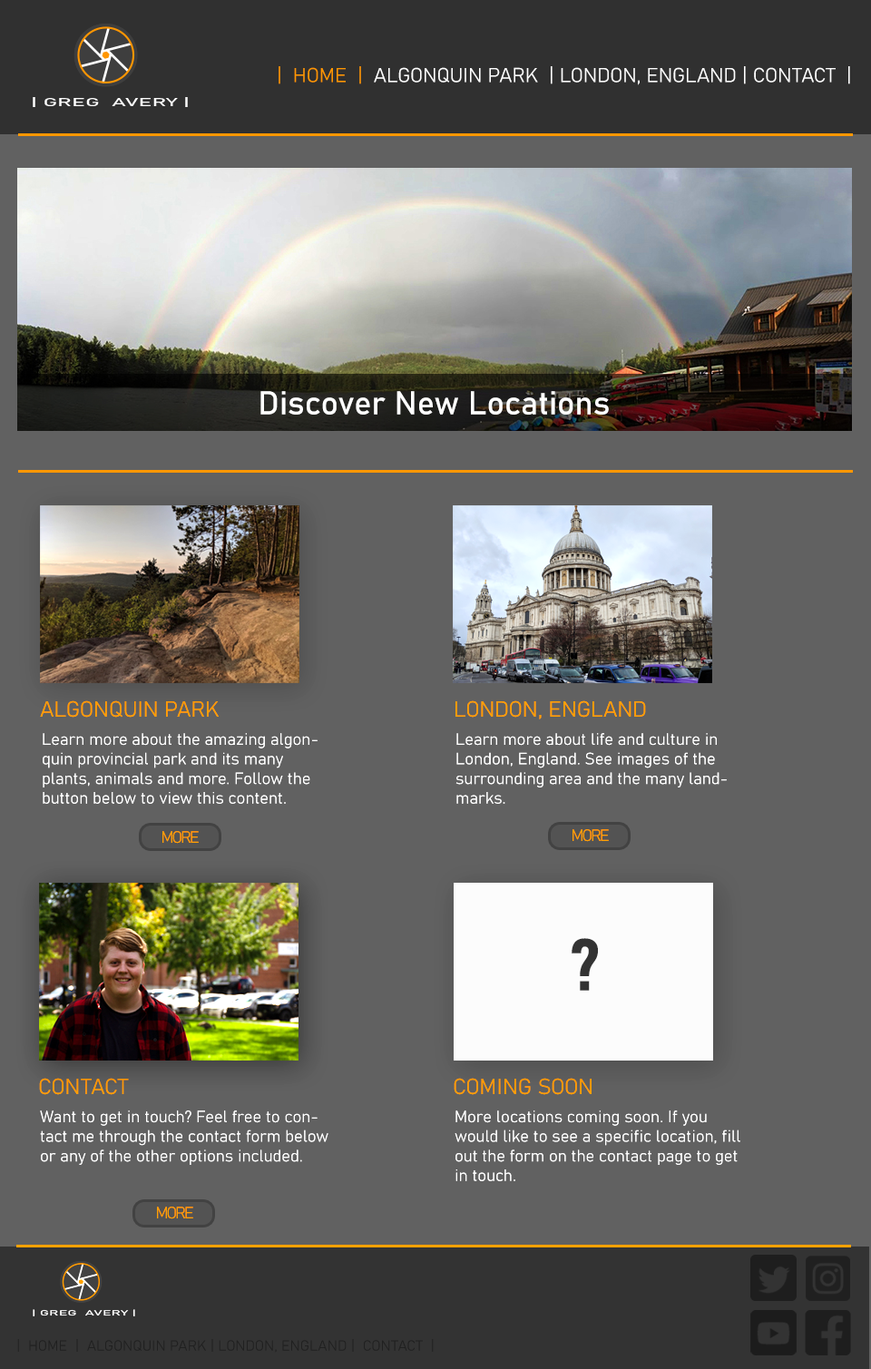
<style>
.page{position:relative;width:871px;height:1369px;background:#616161}
.page>*{position:absolute;margin:0}
.t1{font:20px "Bahnschrift";color:#ffffff;font-style:italic}
.t2{font:20px "Bahnschrift";color:#ff9700;font-style:italic}
.t3{font:32.7px "Bahnschrift";color:#ffffff;font-style:italic}
.t4{font:21.8px "Bahnschrift";color:#ff9700;font-style:italic}
.t5{font:16.3px "Bahnschrift";color:#ffffff;font-style:italic}
.t6{font:16.3px "Bahnschrift-BoldSemiCondensed";color:#ff9700;font-style:italic}
.t7{font:72.6px "Bahnschrift-BoldSemiCondensed";color:#303030;font-style:italic}
.t8{font:14.5px "Bahnschrift_618wght";color:#1e1e1e;font-style:italic}
</style>
<div class="page">
<p class="t1" style="left:279px;top:66px;width:571px;height:19px"><span class="t2">|  HOME  |</span>  ALGONQUIN PARK  | LONDON, ENGLAND | CONTACT  |</p>
<p class="t3" style="left:260px;top:391px;width:349px;height:24px">Discover New Locations</p>
<p class="t4" style="left:40px;top:700px;width:179px;height:18px">ALGONQUIN PARK</p>
<p class="t4" style="left:455px;top:700px;width:191px;height:19px">LONDON, ENGLAND</p>
<p class="t5" style="left:43px;top:733px;width:275px;height:71px">Learn more about the amazing algonquin provincial park and its many plants, animals and more. Follow the button below to view this content.</p>
<p class="t5" style="left:455px;top:733px;width:272px;height:71px">Learn more about life and culture in London, England. See images of the surrounding area and the many landmarks.</p>
<p class="t6" style="left:162px;top:831px;width:37px;height:13px">MORE</p>
<p class="t6" style="left:572px;top:829px;width:37px;height:13px">MORE</p>
<p class="t7" style="left:572px;top:938px;width:26px;height:53px">?</p>
<p class="t4" style="left:39px;top:1078px;width:90px;height:17px">CONTACT</p>
<p class="t4" style="left:454px;top:1078px;width:138px;height:17px">COMING SOON</p>
<p class="t5" style="left:40px;top:1110px;width:288px;height:55px">Want to get in touch? Feel free to contact me through the contact form below or any of the other options included.</p>
<p class="t5" style="left:455px;top:1110px;width:285px;height:71px">More locations coming soon. If you would like to see a specific location, fill out the form on the contact page to get in touch.</p>
<p class="t6" style="left:157px;top:1207px;width:36px;height:12px">MORE</p>
<p class="t8" style="left:17px;top:1339px;width:417px;height:14px">|  HOME  |  ALGONQUIN PARK | LONDON, ENGLAND |  CONTACT  |</p>
</div>
